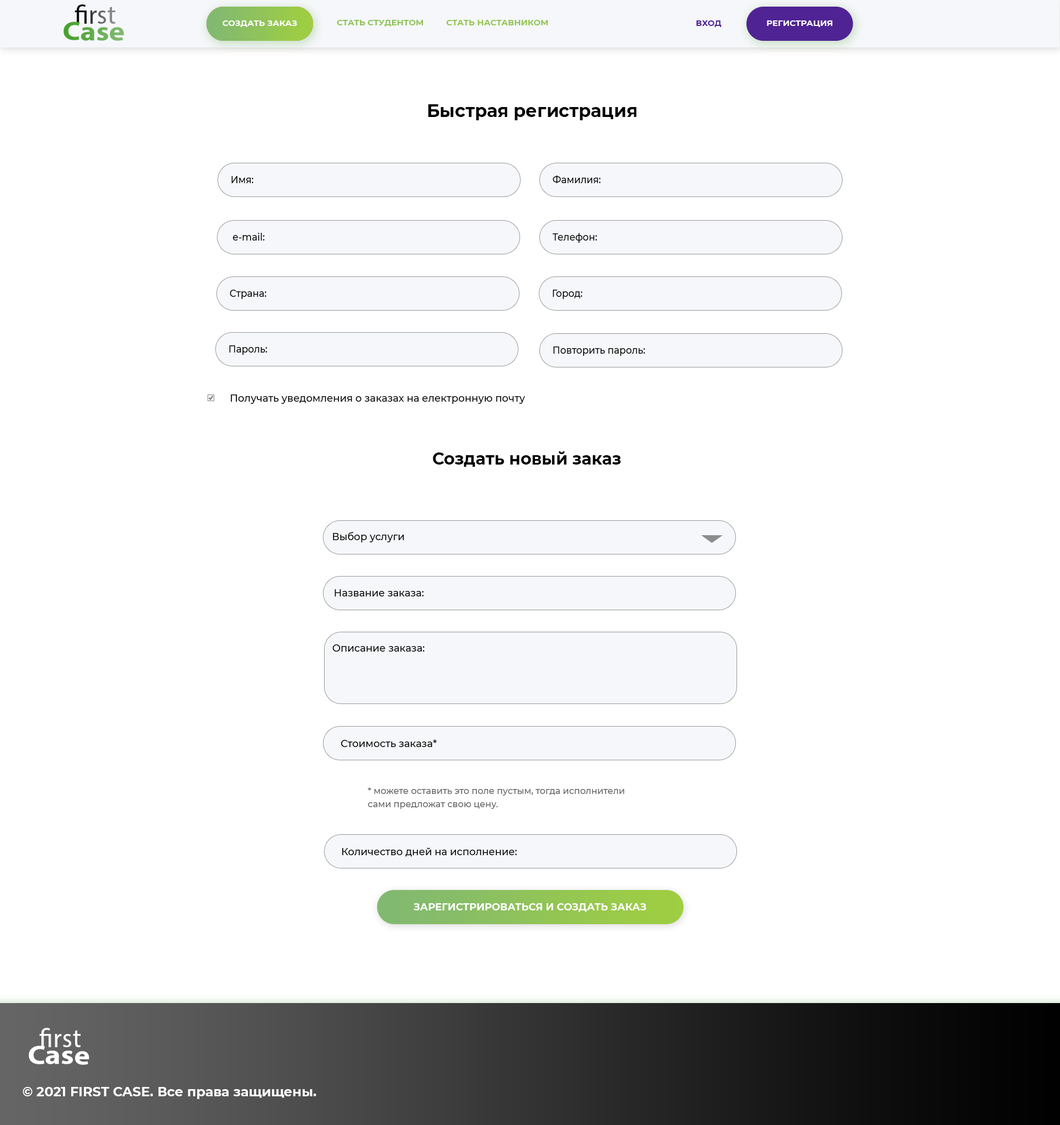
<style>
.page{position:relative;width:1060px;height:1125px;background:#ffffff}
.page>*{position:absolute;margin:0}
.t1{font:26.5px "MyriadPro-Regular"}
.t2{font:26.5px "MyriadPro-Bold";scale:1.13 1}
.t3{font:26.5px "MyriadPro-Regular";scale:1.13 1}
.t4{font:8.3px "Montserrat-Bold";color:#ffffff;text-transform:uppercase}
.t5{font:8.3px "Montserrat-Bold";color:#8fc358;text-transform:uppercase}
.t6{font:8.3px "Montserrat-Bold";color:#93c652;text-transform:uppercase}
.t7{font:8.3px "Montserrat-Bold";color:#4f2393;text-transform:uppercase}
.t8{font:17.7px "Montserrat-Bold";color:#000000}
.t9{font:9.9px "Montserrat-Medium";color:#000000;scale:0.94 1}
.t10{font:9.9px "Montserrat-Medium";color:#000000}
.t11{font:16.6px "Montserrat-Bold";color:#000000}
.t12{font:8.8px/13.2px "Montserrat-Medium";color:#666666}
.t13{font:9.9px "Montserrat-Bold";color:#ffffff;text-transform:uppercase}
.t14{font:26.5px "MyriadPro-Regular";color:#ffffff}
.t15{font:26.5px "MyriadPro-Bold";color:#ffffff;scale:1.13 1}
.t16{font:26.5px "MyriadPro-Regular";color:#ffffff;scale:1.13 1}
.t17{font:13.2px "Montserrat-Bold";color:#ffffff}
</style>
<div class="page">
<p class="t1" style="left:75px;top:4px;width:40px;height:20px">first</p>
<p class="t2" style="left:63px;top:22px;width:61px;height:19px;rotate:1deg"><span class="t3">       </span>Case</p>
<p class="t4" style="left:222px;top:20px;width:75px;height:7px">Создать заказ</p>
<p class="t5" style="left:337px;top:20px;width:86px;height:6px">стать студентом</p>
<p class="t6" style="left:446px;top:20px;width:102px;height:5px">СТАТЬ наставником</p>
<p class="t7" style="left:696px;top:20px;width:25px;height:7px">ВХОД</p>
<p class="t4" style="left:767px;top:20px;width:65px;height:7px">РЕГИСТРАЦИЯ</p>
<p class="t8" style="left:428px;top:104px;width:208px;height:16px">Быстрая регистрация</p>
<p class="t9" style="left:231px;top:176px;width:22px;height:7px">Имя:</p>
<p class="t9" style="left:552px;top:176px;width:48px;height:7px">Фамилия:</p>
<p class="t9" style="left:232px;top:233px;width:32px;height:8px">e-mail:</p>
<p class="t9" style="left:552px;top:233px;width:45px;height:10px">Телефон:</p>
<p class="t9" style="left:230px;top:290px;width:37px;height:9px">Страна:</p>
<p class="t9" style="left:552px;top:290px;width:30px;height:9px">Город:</p>
<p class="t9" style="left:229px;top:345px;width:38px;height:10px">Пароль:</p>
<p class="t9" style="left:553px;top:347px;width:92px;height:9px">Повторить пароль:</p>
<p class="t10" style="left:231px;top:395px;width:294px;height:9px">Получать уведомления о заказах на електронную почту</p>
<p class="t11" style="left:433px;top:451px;width:188px;height:16px">Создать новый заказ</p>
<p class="t10" style="left:333px;top:532px;width:71px;height:11px">Выбор услуги</p>
<p class="t10" style="left:334px;top:589px;width:90px;height:8px">Название заказа:</p>
<p class="t10" style="left:332px;top:645px;width:92px;height:7px">Описание заказа:</p>
<p class="t10" style="left:341px;top:740px;width:96px;height:7px">Стоимость заказа*</p>
<p class="t12" style="left:368px;top:788px;width:256px;height:21px">* можете оставить это поле пустым, тогда исполнители <br>сами предложат свою цену.</p>
<p class="t10" style="left:342px;top:848px;width:175px;height:9px">Количество дней на исполнение:</p>
<p class="t13" style="left:413px;top:903px;width:233px;height:9px">ЗАРЕГИСТРИРОВАТЬСЯ И СОЗДАТЬ ЗАКАЗ</p>
<p class="t14" style="left:39px;top:1028px;width:42px;height:19px">first</p>
<p class="t15" style="left:29px;top:1046px;width:60px;height:19px;rotate:1deg"><span class="t16">       </span>Case</p>
<p class="t17" style="left:23px;top:1087px;width:293px;height:12px">© 2021 FIRST CASE. Все права защищены.</p>
</div>
